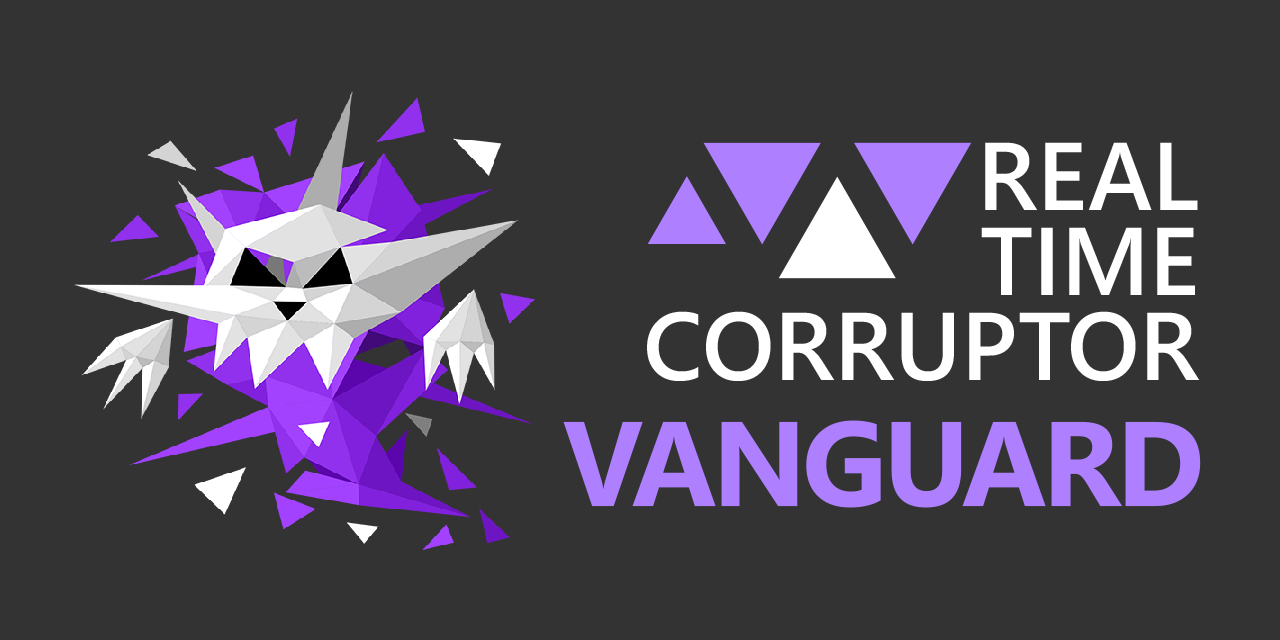
<style>
.page{position:relative;width:1280px;height:640px;background:#333333}
.page>*{position:absolute;margin:0}
.t1{font:96px/85px "SegoeUI-Semibold";color:#ffffff;text-transform:uppercase}
.t2{font:120px "SegoeUI-Bold";letter-spacing:-0.04em;color:#ae7fff;text-transform:uppercase}
</style>
<div class="page">
<p class="t1" style="left:647px;top:142px;width:553px;height:239px;text-align:right">REAL<br>TIME<br>CORRUPTOR</p>
<p class="t2" style="left:563px;top:420px;width:638px;height:88px">VANGUARD</p>
</div>
